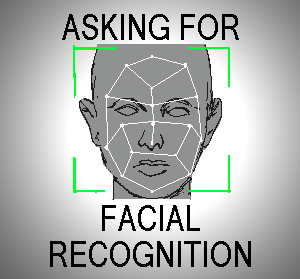
<style>
.page{position:relative;width:300px;height:279px}
.page>*{position:absolute;margin:0}
.t1{font:36px "MicrosoftSansSerif";color:#000000;scale:0.8 1}
.t2{font:36px/36px "MicrosoftSansSerif";color:#000000;scale:0.8 1}
</style>
<div class="page">
<p class="t1" style="left:62px;top:14px;width:177px;height:26px">ASKING FOR</p>
<p class="t2" style="left:50px;top:205px;width:201px;height:62px;text-align:center">FACIAL<br>RECOGNITION</p>
</div>
